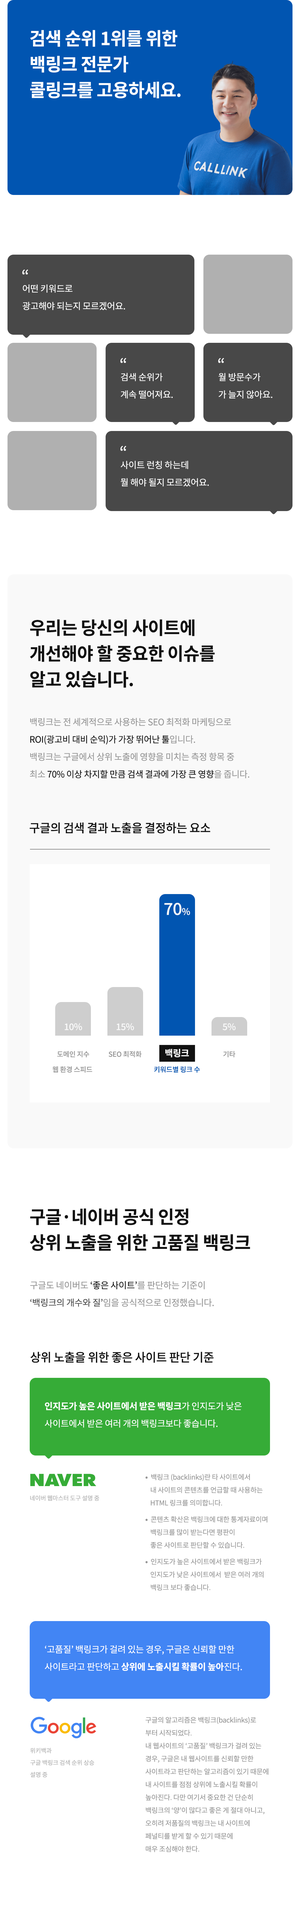
<style>
.page{position:relative;width:300px;height:1912px;background:#ffffff}
.page>*{position:absolute;margin:0}
.t1{font:18px/25.8px "NotoSansKR-Bold";letter-spacing:-0.02em;color:#ffffff}
.t2{font:16.5px "NotoSansKR-Regular";letter-spacing:-0.02em;color:#ffffff}
.t3{font:9px/17.4px "NotoSansKR-Regular";letter-spacing:-0.02em;color:#ffffff}
.t4{font:18px/25.8px "NotoSansKR-Bold";letter-spacing:-0.02em;color:#111111}
.t5{font:9px/17.4px "NotoSansKR-Regular";letter-spacing:-0.02em;color:#969696}
.t6{font:9px/17.4px "NotoSansKR-Regular";letter-spacing:-0.02em;color:#111111}
.t7{font:12px "NotoSansKR-Medium";letter-spacing:-0.02em;color:#111111}
.t8{font:16.5px "NotoSansKR-Medium";letter-spacing:-0.02em;color:#f9f9f9}
.t9{font:9px "NotoSansKR-Medium";letter-spacing:-0.02em;color:#f9f9f9}
.t10{font:9px "NotoSansKR-Bold";letter-spacing:-0.02em;color:#ffffff}
.t11{font:6.9px/15.3px "NotoSansKR-Medium";letter-spacing:-0.02em;color:#969696}
.t12{font:6.9px "NotoSansKR-Medium";letter-spacing:-0.02em;color:#969696}
.t13{font:6.9px "NotoSansKR-Medium";letter-spacing:-0.02em;color:#0155b1}
.t14{font:9px/17.4px "NotoSansKR-Regular";letter-spacing:-0.02em;color:#484848}
.t15{font:9px/17.4px "NotoSansKR-Bold";letter-spacing:-0.02em;color:#ffffff}
.t16{font:6.9px/12.9px "NotoSansKR-Regular";letter-spacing:-0.02em;color:#969696}
.t17{font:6.9px/16.5px "NotoSansKR-Bold";letter-spacing:-0.02em;color:#969696}
.t18{font:6.9px/16.5px "NotoSansKR-Regular";letter-spacing:-0.02em;color:#969696}
.t19{font:6px "NotoSansKR-Regular";letter-spacing:-0.02em;color:#b0b0b0}
.t20{font:6px/12px "NotoSansKR-Regular";letter-spacing:-0.02em;color:#b0b0b0}
</style>
<div class="page">
<p class="t1" style="left:30px;top:30px;width:151px;height:68px">검색 순위 1위를 위한 <br>백링크 전문가 <br>콜링크를 고용하세요.</p>
<p class="t2" style="left:22px;top:269px;width:6px;height:6px">“</p>
<p class="t3" style="left:22px;top:284px;width:103px;height:26px">어떤 키워드로 <br>광고해야 되는지 모르겠어요.</p>
<p class="t2" style="left:120px;top:358px;width:6px;height:5px">“</p>
<p class="t2" style="left:218px;top:358px;width:6px;height:5px">“</p>
<p class="t3" style="left:121px;top:373px;width:52px;height:26px">검색 순위가<br>계속 떨어져요.</p>
<p class="t3" style="left:218px;top:373px;width:54px;height:26px">월 방문수가<br>가 늘지 않아요.</p>
<p class="t2" style="left:120px;top:446px;width:6px;height:5px">“</p>
<p class="t3" style="left:121px;top:461px;width:88px;height:26px">사이트 런칭 하는데<br>뭘 해야 될지 모르겠어요.</p>
<p class="t4" style="left:30px;top:620px;width:185px;height:68px">우리는 당신의 사이트에 <br>개선해야 할 중요한 이슈를 <br>알고 있습니다.</p>
<p class="t5" style="left:30px;top:718px;width:219px;height:60px">백링크는 전 세계적으로 사용하는 SEO 최적화 마케팅으로 <br><span class="t6">ROI(광고비 대비 순익)가 가장 뛰어난 툴</span>입니다. <br>백링크는 구글에서 상위 노출에 영향을 미치는 측정 항목 중<br>최소 <span class="t6">70% 이상 차지할 만큼 검색 결과에 가장 큰 영향</span>을 줍니다.</p>
<p class="t7" style="left:30px;top:823px;width:180px;height:11px">구글의 검색 결과 노출을 결정하는 요소</p>
<p class="t8" style="left:164px;top:903px;width:26px;height:13px">70<span class="t9">%</span></p>
<p class="t9" style="left:64px;top:1023px;width:18px;height:7px">10%</p>
<p class="t9" style="left:116px;top:1023px;width:18px;height:7px">15%</p>
<p class="t9" style="left:223px;top:1023px;width:13px;height:7px">5%</p>
<p class="t10" style="left:165px;top:1049px;width:24px;height:9px">백링크</p>
<p class="t11" style="left:52px;top:1051px;width:40px;height:22px;text-align:center">도메인 지수<br>웹 환경 스피드</p>
<p class="t12" style="left:109px;top:1051px;width:33px;height:7px">SEO 최적화</p>
<p class="t12" style="left:223px;top:1051px;width:13px;height:7px">기타</p>
<p class="t13" style="left:154px;top:1066px;width:46px;height:7px">키워드별 링크 수</p>
<p class="t4" style="left:30px;top:1209px;width:220px;height:42px">구글·네이버 공식 인정<br>상위 노출을 위한 고품질 백링크</p>
<p class="t5" style="left:30px;top:1281px;width:184px;height:26px">구글도 네이버도 <span class="t6">‘좋은 사이트’</span>를 판단하는 기준이<br><span class="t14">‘백링크의 개수와 질’</span>임을 공식적으로 인정했습니다.</p>
<p class="t7" style="left:30px;top:1352px;width:184px;height:11px">상위 노출을 위한 좋은 사이트 판단 기준</p>
<p class="t3" style="left:45px;top:1402px;width:197px;height:26px"><span class="t15">인지도가 높은 사이트에서 받은 백링크</span>가 인지도가 낮은 <br>사이트에서 받은 여러 개의 백링크보다 좋습니다.</p>
<p class="t16" style="left:146px;top:1474px;width:121px;height:117px"><span class="t17">•  </span><span class="t18">백링크 (backlinks)란 타 사이트에서 <br>    </span>내 사이트의 콘텐츠를 언급할 때 사용하는 <br>    HTML 링크를 의미합니다.<br><span class="t17">•  </span><span class="t18">콘텐츠 확산은 백링크에 대한 통계자료이며 <br>    </span>백링크를 많이 받는다면 평판이 <br>    좋은 사이트로 판단할 수 있습니다.<br><span class="t17">•  </span><span class="t18">인지도가 높은 사이트에서 받은 백링크가 <br>    </span>인지도가 낮은 사이트에서  받은 여러 개의 <br>    백링크 보다 좋습니다.</p>
<p class="t19" style="left:30px;top:1496px;width:69px;height:5px">네이버 웹마스터 도구 설명 중</p>
<p class="t3" style="left:45px;top:1646px;width:197px;height:26px">‘고품질’ 백링크가 걸려 있는 경우, 구글은 신뢰할 만한 <br>사이트라고 판단하고 <span class="t15">상위에 노출시킬 확률이 높아</span>진다.</p>
<p class="t16" style="left:146px;top:1717px;width:122px;height:136px">구글의 알고리즘은 백링크(backlinks)로<br>부터 시작되었다.<br>내 웹사이트의 ‘고품질’ 백링크가 걸려 있는 <br>경우, 구글은 내 웹사이트를 신뢰할 만한 <br>사이트라고 판단하는 알고리즘이 있기 때문에 <br>내 사이트를 점점 상위에 노출시킬 확률이 <br>높아진다. 다만 여기서 중요한 건 단순히 <br>백링크의 ‘양’이 많다고 좋은 게 절대 아니고, <br>오히려 저품질의 백링크는 내 사이트에 <br>페널티를 받게 할 수 있기 때문에 <br>매우 조심해야 한다.</p>
<p class="t20" style="left:30px;top:1748px;width:64px;height:30px">위키백과 <br>구글 백링크 검색 순위 상승 <br>설명 중</p>
</div>
